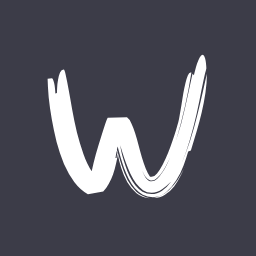
<style>
.page{position:relative;width:256px;height:256px;background:#3c3c48}
.page>*{position:absolute;margin:0}
.t1{font:180px "FingerPaint-Regular";color:#ffffff}
</style>
<div class="page">
<p class="t1" style="left:47px;top:54px;width:160px;height:145px">W</p>
</div>
